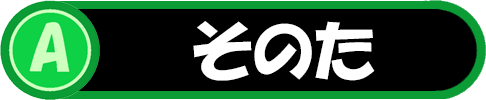
<style>
.page{position:relative;width:486px;height:100px;background:#000000}
.page>*{position:absolute;margin:0}
.t1{font:66.7px "HGPSoeiKakupoptai";color:#ffffff}
</style>
<div class="page">
<p class="t1" style="left:193px;top:21px;width:182px;height:60px">そのた</p>
</div>
